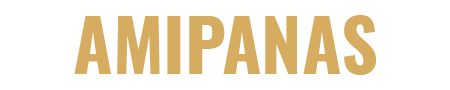
<style>
.page{position:relative;width:450px;height:90px;background:#ffffff}
.page>*{position:absolute;margin:0}
.t1{font:72px "Oswald-Bold";color:#d6ad60}
</style>
<div class="page">
<p class="t1" style="left:74px;top:15px;width:303px;height:60px">AMIPANAS</p>
</div>
